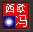
<style>
.page{position:relative;width:33px;height:32px;background:#f20000}
.page>*{position:absolute;margin:0}
.t1{font:10.4px "SimSun";color:#ffffff}
.t2{font:11.7px "SimSun";color:#ffffff}
</style>
<div class="page">
<p class="t1" style="left:6px;top:4px;width:19px;height:9px">西欧</p>
<p class="t2" style="left:16px;top:15px;width:11px;height:12px">冯</p>
</div>
